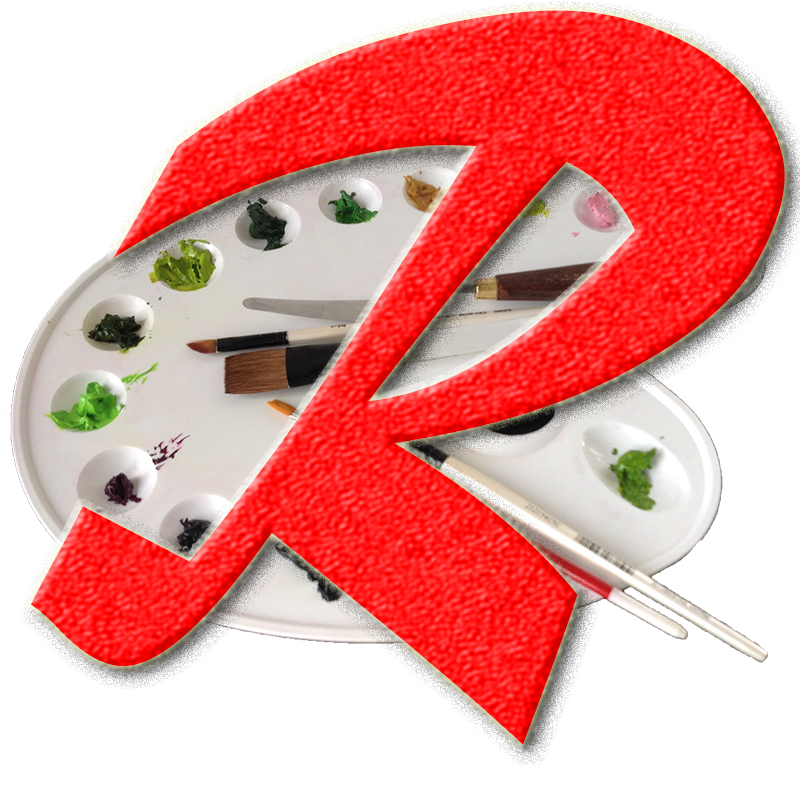
<style>
.page{position:relative;width:800px;height:800px;background:#ffffff}
.page>*{position:absolute;margin:0}
.t1{font:800px "MaturaMTScriptCapitals"}
</style>
<div class="page">
<p class="t1" style="left:31px;top:10px;width:754px;height:735px">R</p>
</div>
